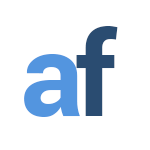
<style>
.page{position:relative;width:150px;height:150px;background:#ffffff}
.page>*{position:absolute;margin:0}
.t1{font:116px "Roboto-Bold";letter-spacing:-0.07em;color:#5395df}
.t2{font:116px "Roboto-Bold";letter-spacing:-0.07em;color:#2a4c71}
</style>
<div class="page">
<p class="t1" style="left:24px;top:26px;width:94px;height:91px">a<span class="t2">f</span></p>
</div>
